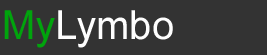
<style>
.page{position:relative;width:267px;height:55px;background:#333333}
.page>*{position:absolute;margin:0}
.t1{font:40px "ArialMT";color:#fefefe}
.t2{font:40px "ArialMT";color:#00a40c}
</style>
<div class="page">
<p class="t1" style="left:4px;top:10px;width:169px;height:38px"><span class="t2">My</span>Lymbo</p>
</div>
